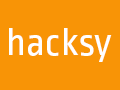
<style>
.page{position:relative;width:120px;height:90px;background:#f89406}
.page>*{position:absolute;margin:0}
.t1{font:40px "RopaSans-Regular";color:#ffffff}
</style>
<div class="page">
<p class="t1" style="left:9px;top:28px;width:103px;height:34px">hacksy</p>
</div>
